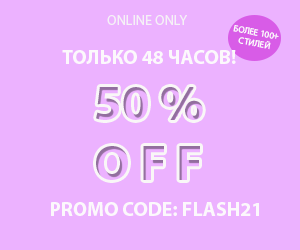
<style>
.page{position:relative;width:300px;height:250px;background:#ecb2ff}
.page>*{position:absolute;margin:0}
.t1{font:14px "MyriadPro-Regular";color:#f5f1f6}
.t2{font:9px "MyriadPro-Regular";color:#fcf8fc}
.t3{font:20px "MyriadPro-Bold";color:#fcf8fc}
</style>
<div class="page">
<p class="t1" style="left:107px;top:15px;width:80px;height:10px">ONLINE ONLY</p>
<p class="t2" style="left:233px;top:25px;width:46px;height:25px;rotate:10deg">БОЛЕЕ 100+ СТИЛЕЙ</p>
<p class="t3" style="left:62px;top:50px;width:174px;height:14px">ТОЛЬКО 48 ЧАСОВ!</p>
<p class="t3" style="left:51px;top:202px;width:208px;height:14px">PROMO CODE: FLASH21</p>
</div>
